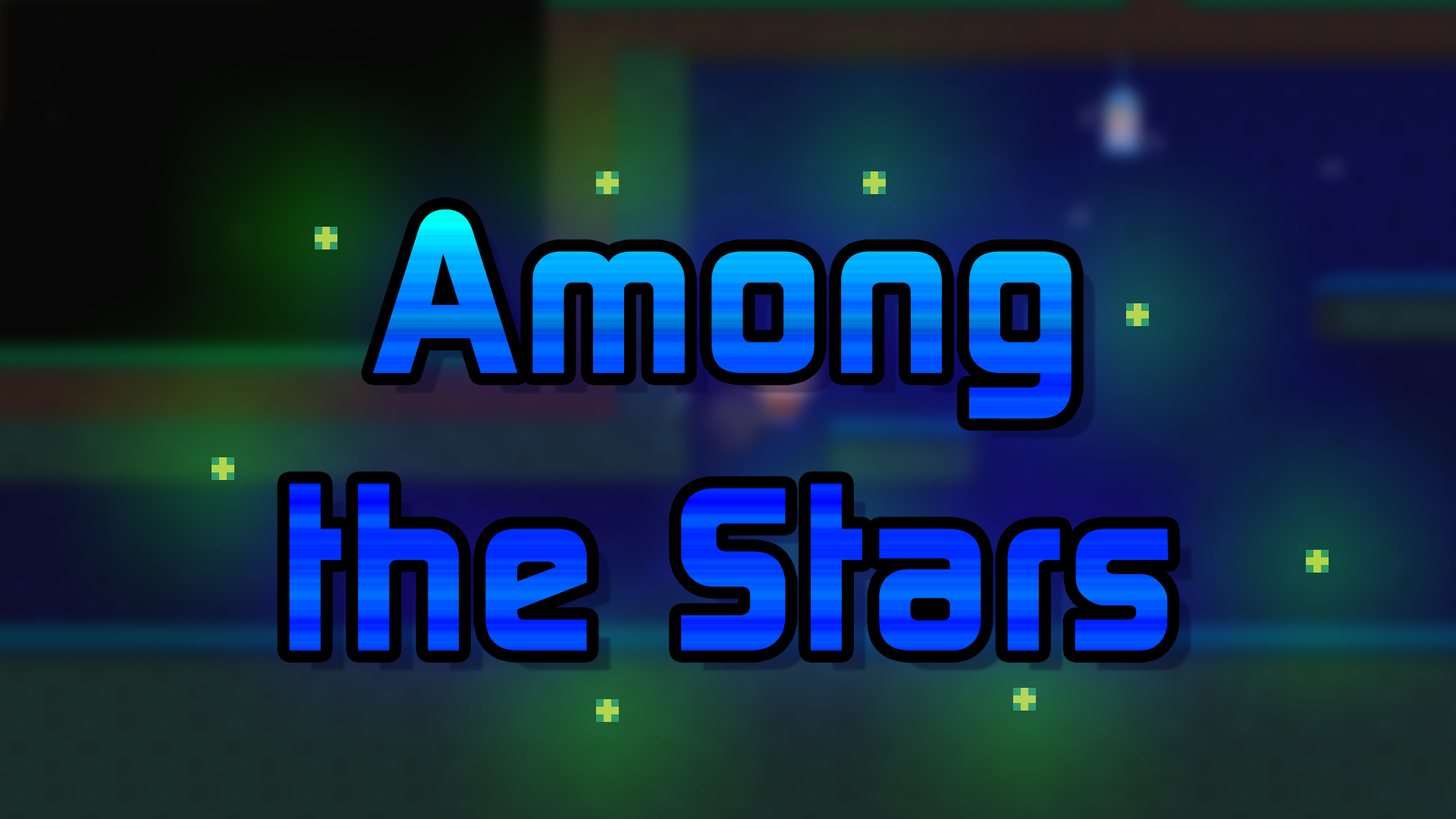
<style>
.page{position:relative;width:1456px;height:819px}
.page>*{position:absolute;margin:0}
.t1{font:231.2px "ContinuumBold";letter-spacing:0.025em}
</style>
<div class="page">
<p class="t1" style="left:289px;top:209px;width:880px;height:442px;text-align:center">Among<br>the Stars</p>
</div>
